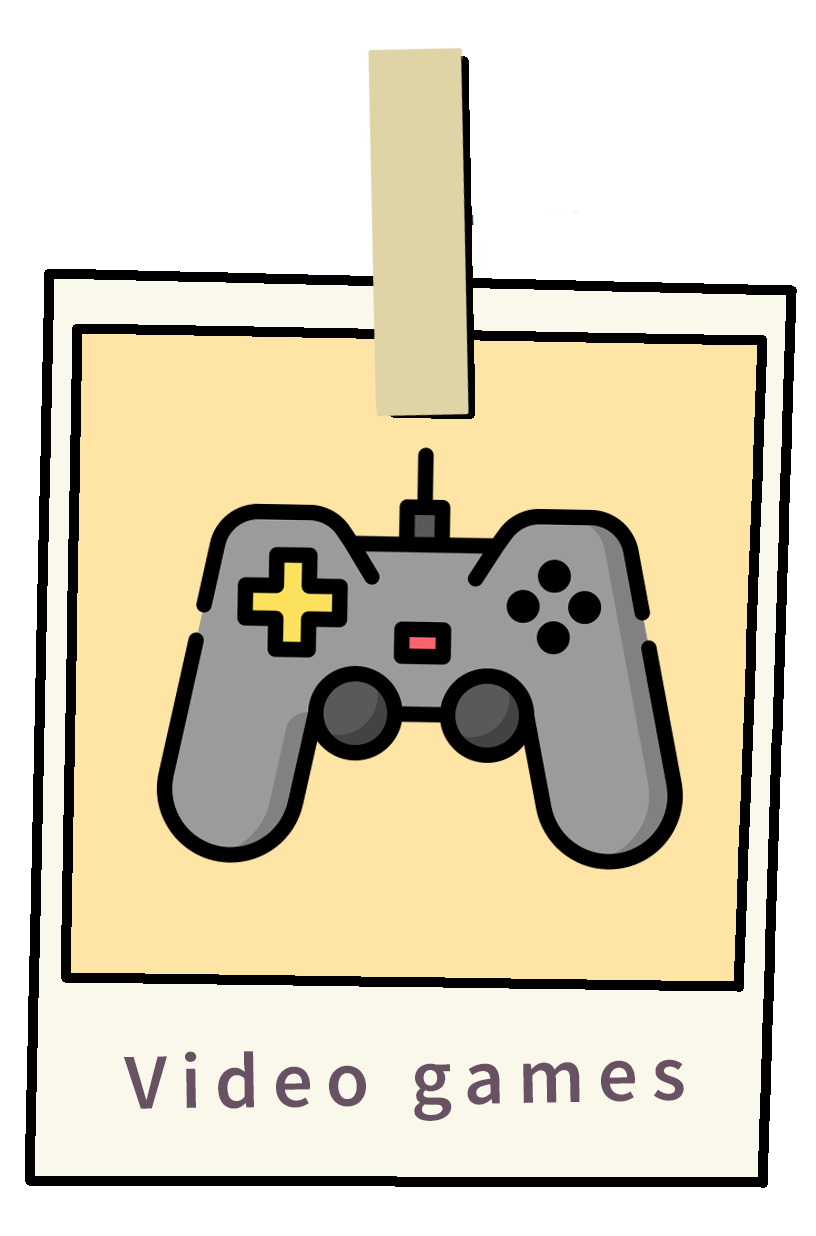
<style>
.page{position:relative;width:816px;height:1236px;background:#ffffff}
.page>*{position:absolute;margin:0}
.t1{font:79.5px "SourceSansRoman-Semibold";letter-spacing:0.165em;color:#695164;font-weight:bold}
</style>
<div class="page">
<p class="t1" style="left:123px;top:1051px;width:561px;height:70px;rotate:-1deg">Video games</p>
</div>
